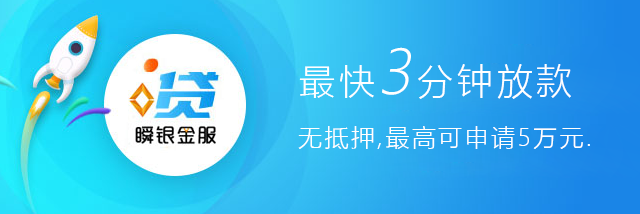
<style>
.page{position:relative;width:640px;height:214px}
.page>*{position:absolute;margin:0}
.t1{font:35.9px "MicrosoftYaHeiLight";letter-spacing:0.1em;color:#ffffff}
.t2{font:60px "MicrosoftYaHeiLight";letter-spacing:0.1em;color:#ffffff;font-style:italic}
.t3{font:24px "MicrosoftYaHeiLight";letter-spacing:0.1em;color:#ffffff}
</style>
<div class="page">
<p class="t1" style="left:299px;top:47px;width:272px;height:52px">最快<span class="t2">3</span>分钟放款</p>
<p class="t3" style="left:298px;top:126px;width:292px;height:23px">无抵押,最高可申请5万元.</p>
</div>
